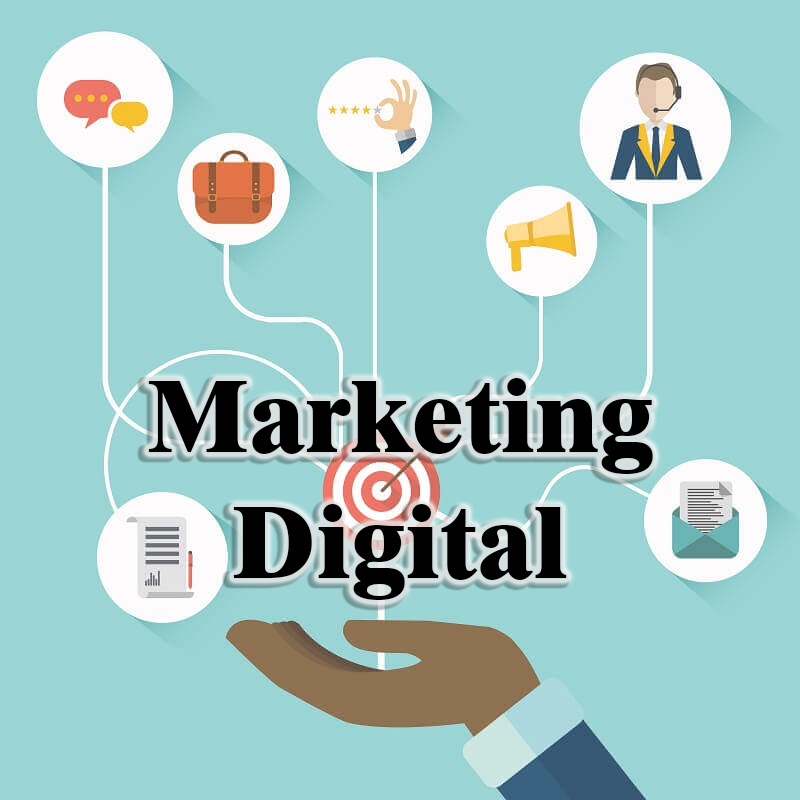
<style>
.page{position:relative;width:800px;height:800px;background:#9cd5d5}
.page>*{position:absolute;margin:0}
.t1{font:105px "Dutch801BT-ExtraBold";color:#010102}
</style>
<div class="page">
<p class="t1" style="left:148px;top:378px;width:505px;height:222px;text-align:center">Marketing<br>Digital</p>
</div>
